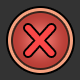
<style>
.page{position:relative;width:80px;height:80px;background:#333333}
.page>*{position:absolute;margin:0}
.t1{font:57.6px "OCRAStd";letter-spacing:0.01em;color:#fa4747;scale:1.09 1}
</style>
<div class="page">
<p class="t1" style="left:25px;top:25px;width:30px;height:31px">x</p>
</div>
